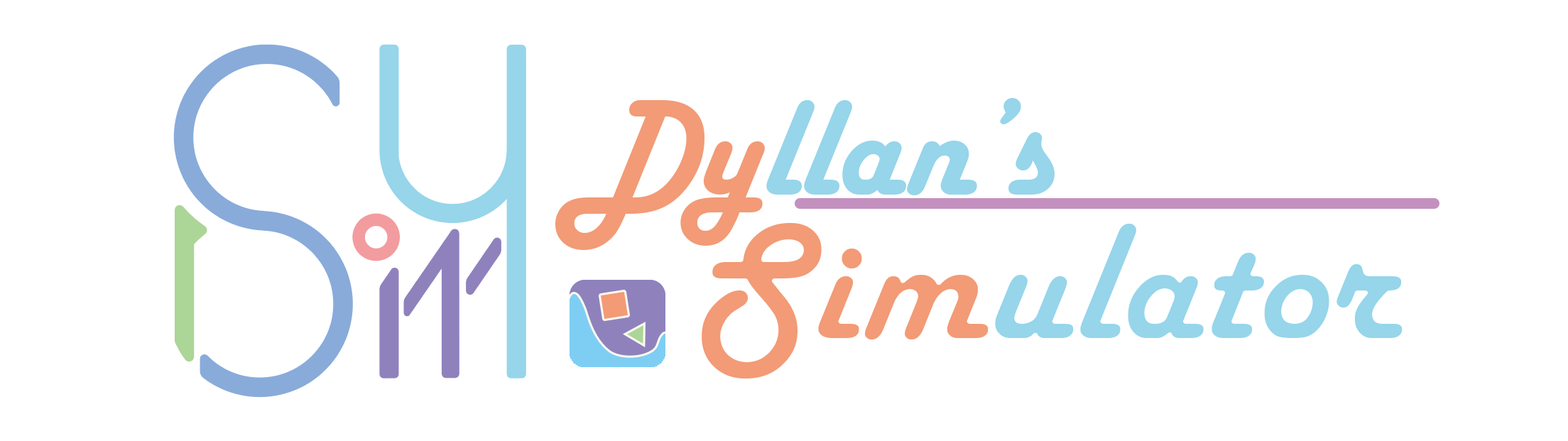
<style>
.page{position:relative;width:1568px;height:441px;background:#ffffff}
.page>*{position:absolute;margin:0}
.t1{font:142px "HarlowSolid";color:#96d5ea}
.t2{font:142px "HarlowSolid";color:#f29b76}
.t3{font:177.5px "HarlowSolid";color:#96d5ea}
.t4{font:177.5px "HarlowSolid";color:#f29b76}
</style>
<div class="page">
<p class="t1" style="left:555px;top:98px;width:500px;height:152px"><span class="t2">Dy</span>llan’s</p>
<p class="t3" style="left:699px;top:221px;width:706px;height:160px"><span class="t4">Sim</span>ulator</p>
</div>
